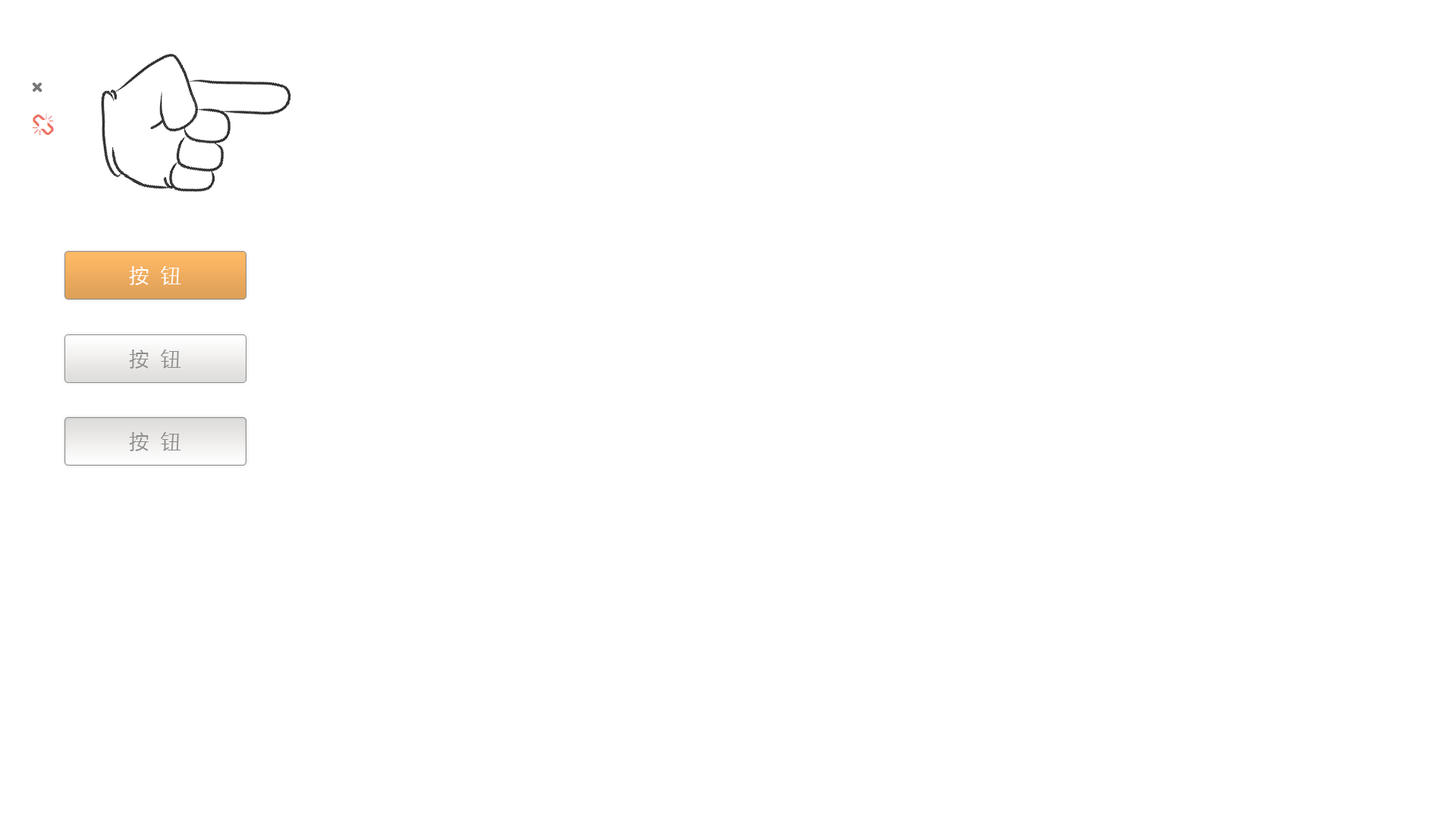
<style>
.page{position:relative;width:1456px;height:819px;background:#ffffff}
.page>*{position:absolute;margin:0}
.t1{font:21.2px "STXihei";color:#ffffff}
.t2{font:21.2px "STXihei";color:#8b8b8b}
</style>
<div class="page">
<p class="t1" style="left:129px;top:266px;width:52px;height:19px">按  钮</p>
<p class="t2" style="left:129px;top:350px;width:52px;height:19px">按  钮</p>
<p class="t2" style="left:129px;top:432px;width:52px;height:19px">按  钮</p>
</div>
